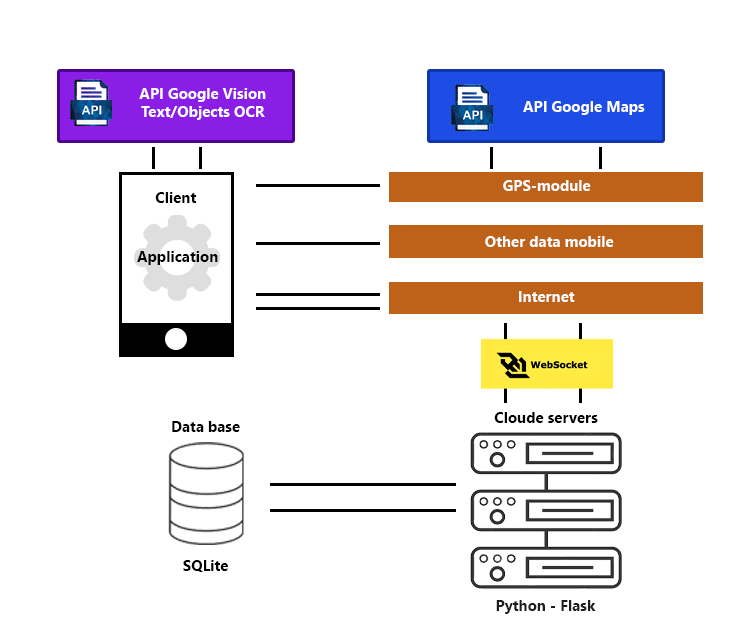
<style>
.page{position:relative;width:748px;height:641px;background:#ffffff}
.page>*{position:absolute;margin:0}
.t1{font:15px "SegoeUI-Bold";color:#ffffff}
.t2{font:15px "SegoeUI-Bold";color:#000000}
.t3{font:15px "SegoeUI-Bold";color:#1c1c1c}
</style>
<div class="page">
<p class="t1" style="left:139px;top:88px;width:127px;height:32px;text-align:center">API Google Vision<br>Text/Objects OCR</p>
<p class="t1" style="left:523px;top:101px;width:122px;height:14px">API Google Maps</p>
<p class="t1" style="left:503px;top:180px;width:88px;height:11px">GPS-module</p>
<p class="t2" style="left:155px;top:192px;width:41px;height:11px">Client</p>
<p class="t1" style="left:485px;top:236px;width:129px;height:11px">Other data mobile</p>
<p class="t2" style="left:137px;top:251px;width:81px;height:14px">Application</p>
<p class="t1" style="left:519px;top:291px;width:56px;height:11px">Internet</p>
<p class="t2" style="left:494px;top:412px;width:104px;height:11px">Cloude servers</p>
<p class="t2" style="left:172px;top:421px;width:68px;height:11px">Data base</p>
<p class="t2" style="left:183px;top:560px;width:45px;height:12px">SQLite</p>
<p class="t3" style="left:496px;top:600px;width:100px;height:14px">Python - Flask</p>
</div>
